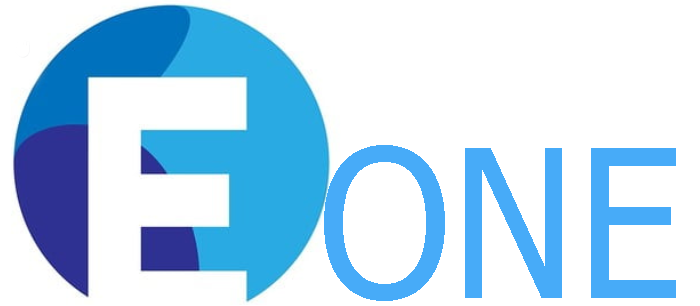
<style>
.page{position:relative;width:700px;height:306px;background:#ffffff}
.page>*{position:absolute;margin:0}
.t1{font:206.3px "Tahoma";color:#47abf8;scale:0.91 1}
</style>
<div class="page">
<p class="t1" style="left:324px;top:145px;width:352px;height:156px">ONE</p>
</div>
